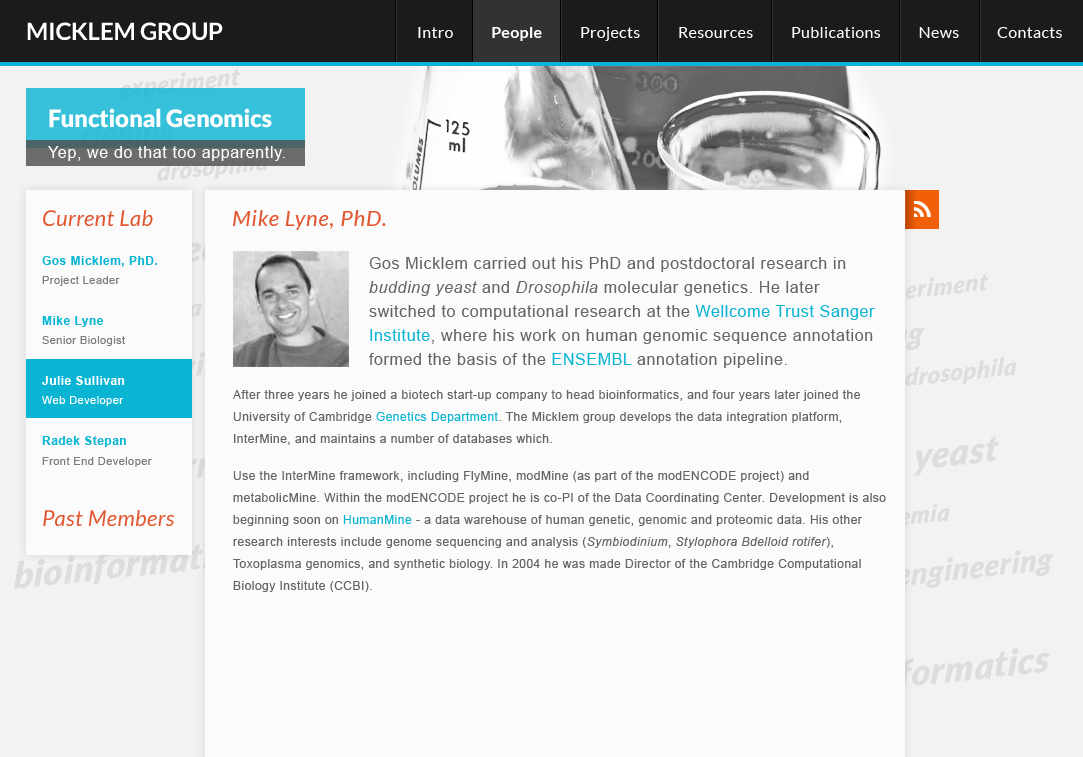
<style>
.page{position:relative;width:1083px;height:757px;background:#fbfbfb}
.page>*{position:absolute;margin:0}
.t1{font:24px "Lato-Bold";letter-spacing:-0.01em;color:#ffffff;text-transform:uppercase}
.t2{font:16px "Lato-Regular";letter-spacing:0.02em;color:#ffffff}
.t3{font:16px "Lato-Bold";letter-spacing:0.02em;color:#ffffff}
.t4{font:24px "Lato-BlackItalic";letter-spacing:0.02em;color:#dddddd;font-style:italic}
.t5{font:24px "Lato-Black";letter-spacing:-0.01em;color:#ffffff}
.t6{font:16px "ArialMT";letter-spacing:0.04em;color:#ffffff}
.t7{font:22px "Lato-Italic";letter-spacing:0.02em;color:#e2562f}
.t8{font:22px "Lato-Italic";letter-spacing:0.04em;color:#e2562f}
.t9{font:12px "Arial-BoldMT";letter-spacing:0.04em;color:#0ab5d3}
.t10{font:16px/24px "ArialMT";letter-spacing:0.04em;color:#656565}
.t11{font:16px/24px "Arial-ItalicMT";letter-spacing:0.04em;color:#656565}
.t12{font:16px/24px "ArialMT";letter-spacing:0.04em;color:#0ab5d3}
.t13{font:11px "ArialMT";letter-spacing:0.04em;color:#7c7c7c}
.t14{font:24px "Lato-BlackItalic";letter-spacing:0.02em;font-style:italic}
.t15{font:12px "Arial-BoldMT";letter-spacing:0.04em;color:#fefefe}
.t16{font:12px/22px "ArialMT";letter-spacing:0.04em;color:#656565}
.t17{font:12px/22px "ArialMT";letter-spacing:0.04em;color:#0ab5d3}
.t18{font:11px "ArialMT";letter-spacing:0.04em;color:#ffffff}
.t19{font:36px "Lato-BlackItalic";letter-spacing:0.02em;color:#dddddd;font-style:italic}
.t20{font:12px/22px "Arial-ItalicMT";letter-spacing:0.04em;color:#656565}
.t21{font:30px "Lato-BlackItalic";letter-spacing:0.02em;color:#dddddd;font-style:italic}
.t22{font:36px "Lato-BlackItalic";letter-spacing:0.02em;font-style:italic}
</style>
<div class="page">
<p class="t1" style="left:27px;top:22px;width:196px;height:18px">Micklem Group</p>
<p class="t2" style="left:418px;top:27px;width:644px;height:14px">Intro           <span class="t3">People           </span>Projects           Resources           Publications           News           Contacts</p>
<p class="t4" style="left:119px;top:69px;width:122px;height:30px;rotate:-6deg">experiment</p>
<p class="t5" style="left:49px;top:108px;width:223px;height:20px">Functional Genomics</p>
<p class="t6" style="left:48px;top:146px;width:237px;height:15px">Yep, we do that too apparently.</p>
<p class="t7" style="left:43px;top:210px;width:110px;height:16px">Current Lab</p>
<p class="t8" style="left:233px;top:210px;width:153px;height:20px">Mike Lyne, PhD.</p>
<p class="t9" style="left:42px;top:256px;width:116px;height:11px">Gos Micklem, PhD.</p>
<p class="t10" style="left:369px;top:257px;width:506px;height:111px">Gos Micklem carried out his PhD and postdoctoral research in<br><span class="t11">budding yeast</span> and <span class="t11">Drosophila </span>molecular genetics. He later<br>switched to computational research at the <span class="t12">Wellcome Trust Sanger<br>Institute</span>, where his work on human genomic sequence annotation<br>formed the basis of the <span class="t12">ENSEMBL </span>annotation pipeline.</p>
<p class="t13" style="left:42px;top:276px;width:78px;height:10px">Project Leader</p>
<p class="t14" style="left:867px;top:274px;width:122px;height:30px;rotate:-6deg">experiment</p>
<p class="t9" style="left:42px;top:316px;width:62px;height:11px">Mike Lyne</p>
<p class="t13" style="left:42px;top:336px;width:83px;height:10px">Senior Biologist</p>
<p class="t4" style="left:905px;top:357px;width:112px;height:29px;rotate:-6deg">drosophila</p>
<p class="t15" style="left:42px;top:376px;width:83px;height:9px">Julie Sullivan</p>
<p class="t16" style="left:233px;top:390px;width:627px;height:55px">After three years he joined a biotech start-up company to head bioinformatics, and four years later joined the<br>University of Cambridge <span class="t17">Genetics Department</span>. The Micklem group develops the data integration platform,<br>InterMine, and maintains a number of databases which.</p>
<p class="t18" style="left:42px;top:396px;width:82px;height:10px">Web Developer</p>
<p class="t9" style="left:42px;top:436px;width:84px;height:11px">Radek Stepan</p>
<p class="t19" style="left:914px;top:436px;width:85px;height:40px;rotate:-6deg">yeast</p>
<p class="t13" style="left:42px;top:457px;width:110px;height:10px">Front End Developer</p>
<p class="t16" style="left:233px;top:471px;width:653px;height:121px">Use the InterMine framework, including FlyMine, modMine (as part of the modENCODE project) and<br>metabolicMine. Within the modENCODE project he is co-PI of the Data Coordinating Center. Development is also<br>beginning soon on <span class="t17">HumanMine </span>- a data warehouse of human genetic, genomic and proteomic data. His other<br>research interests include genome sequencing and analysis (<span class="t20">Symbiodinium</span>, <span class="t20">Stylophora Bdelloid rotifer</span>),<br>Toxoplasma genomics, and synthetic biology. In 2004 he was made Director of the Cambridge Computational<br>Biology Institute (CCBI).</p>
<p class="t7" style="left:43px;top:510px;width:131px;height:16px">Past Members</p>
<p class="t19" style="left:13px;top:541px;width:232px;height:48px;rotate:-6deg">bioinformatics</p>
<p class="t21" style="left:896px;top:550px;width:158px;height:38px;rotate:-6deg">engineering</p>
<p class="t22" style="left:818px;top:648px;width:232px;height:48px;rotate:-6deg">bioinformatics</p>
</div>
